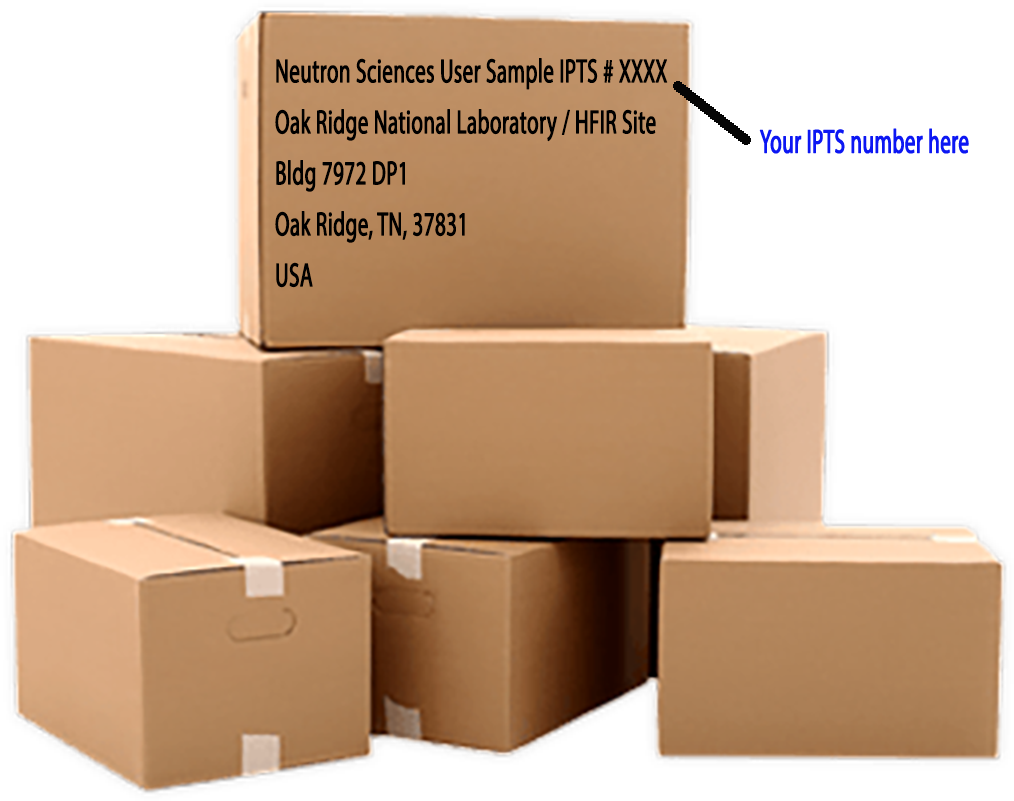
<style>
.page{position:relative;width:1014px;height:801px;background:#ffffff}
.page>*{position:absolute;margin:0}
.t1{font:57.6px/51px "MyriadPro-Regular";color:#000000;font-weight:bold;scale:0.62 1}
.t2{font:57.6px "MyriadPro-Regular";color:#0c17f3;font-weight:bold;scale:0.62 1}
</style>
<div class="page">
<p class="t1" style="left:275px;top:58px;width:393px;height:230px">Neutron Sciences User Sample IPTS # XXXX<br>Oak Ridge National Laboratory / HFIR Site<br>Bldg 7972 DP1<br>Oak Ridge, TN, 37831<br>USA</p>
<p class="t2" style="left:759px;top:128px;width:210px;height:26px">Your IPTS number here</p>
</div>
